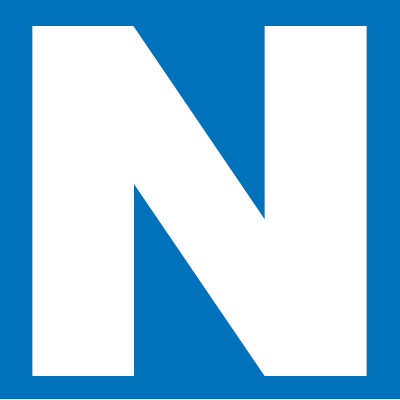
<style>
.page{position:relative;width:400px;height:400px;background:#ffffff}
.page>*{position:absolute;margin:0}
.t1{font:489.4px "Arial-Black";letter-spacing:-0.01em;color:#ffffff}
</style>
<div class="page">
<p class="t1" style="left:32px;top:26px;width:335px;height:350px">N</p>
</div>
